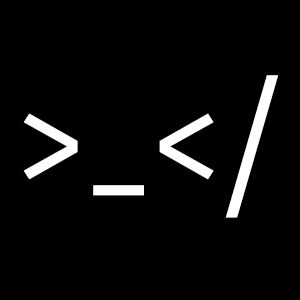
<style>
.page{position:relative;width:300px;height:300px;background:#000000}
.page>*{position:absolute;margin:0}
.t1{font:133.3px "Iosevka-Term";color:#ffffff}
</style>
<div class="page">
<p class="t1" style="left:23px;top:75px;width:255px;height:143px">&gt;_&lt;/</p>
</div>
